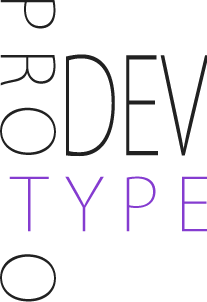
<style>
.page{position:relative;width:207px;height:302px;background:#ffffff}
.page>*{position:absolute;margin:0}
.t1{font:72px/26px "KozGoPr6N-ExtraLight";color:#212121}
.t2{font:132.2px "KozGoPro-ExtraLight";color:#212121;scale:0.64 1}
.t3{font:72px "KozGoPro-ExtraLight";color:#853cd0}
.t4{font:72px "KozGoPr6N-ExtraLight";color:#212121}
</style>
<div class="page">
<p class="t1" style="left:0px;top:0px;width:56px;height:155px">P R O</p>
<p class="t2" style="left:66px;top:54px;width:143px;height:103px">DEV</p>
<p class="t3" style="left:9px;top:176px;width:200px;height:56px">T Y P E</p>
<p class="t4" style="left:0px;top:254px;width:56px;height:48px">O</p>
</div>
